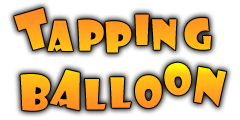
<style>
.page{position:relative;width:240px;height:120px;background:#ffffff}
.page>*{position:absolute;margin:0}
.t1{font:50.2px "ShowcardGothic-Reg";color:#ff9921}
.t2{font:40.6px "ShowcardGothic-Reg";color:#ffa11f}
.t3{font:40.6px "ShowcardGothic-Reg";color:#ffae1b}
.t4{font:40.6px "ShowcardGothic-Reg";color:#ffa61d}
.t5{font:40.6px "ShowcardGothic-Reg";color:#ffa91c}
.t6{font:40.6px "ShowcardGothic-Reg";color:#ffa71d}
.t7{font:40.6px "ShowcardGothic-Reg"}
.t8{font:46.9px "ShowcardGothic-Reg"}
.t9{font:48.7px "ShowcardGothic-Reg"}
.t10{font:40.6px "ShowcardGothic-Reg";color:#ffa41e}
.t11{font:40.6px "ShowcardGothic-Reg";color:#ffaa1c}
.t12{font:47px "ShowcardGothic-Reg";color:#ffb319}
</style>
<div class="page">
<p class="t1" style="left:14px;top:8px;width:33px;height:42px;rotate:-16deg">T</p>
<p class="t2" style="left:135px;top:14px;width:14px;height:31px">i</p>
<p class="t3" style="left:47px;top:20px;width:26px;height:32px">a</p>
<p class="t4" style="left:78px;top:19px;width:26px;height:32px">p</p>
<p class="t5" style="left:105px;top:21px;width:27px;height:32px">p</p>
<p class="t4" style="left:152px;top:19px;width:25px;height:32px">n</p>
<p class="t6" style="left:184px;top:18px;width:28px;height:32px">g</p>
<p class="t7" style="left:164px;top:62px;width:28px;height:34px;rotate:-6deg">o</p>
<p class="t8" style="left:20px;top:74px;width:31px;height:37px">b</p>
<p class="t9" style="left:49px;top:69px;width:31px;height:42px;rotate:13deg">a</p>
<p class="t10" style="left:110px;top:77px;width:21px;height:31px">l</p>
<p class="t11" style="left:135px;top:75px;width:27px;height:33px">o</p>
<p class="t12" style="left:194px;top:66px;width:33px;height:41px;rotate:10deg">n</p>
<p class="t2" style="left:85px;top:79px;width:21px;height:31px">l</p>
</div>
